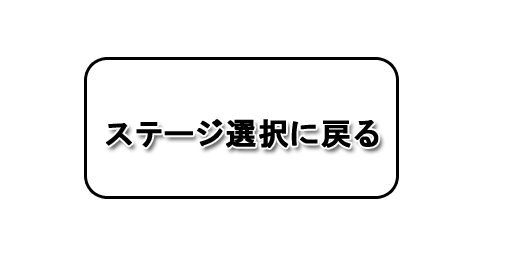
<style>
.page{position:relative;width:512px;height:256px;background:#ffffff}
.page>*{position:absolute;margin:0}
.t1{font:30px "HGPGothicE";letter-spacing:0.05em;color:#000000;font-weight:bold}
</style>
<div class="page">
<p class="t1" style="left:106px;top:119px;width:273px;height:29px">ステージ選択に戻る</p>
</div>
